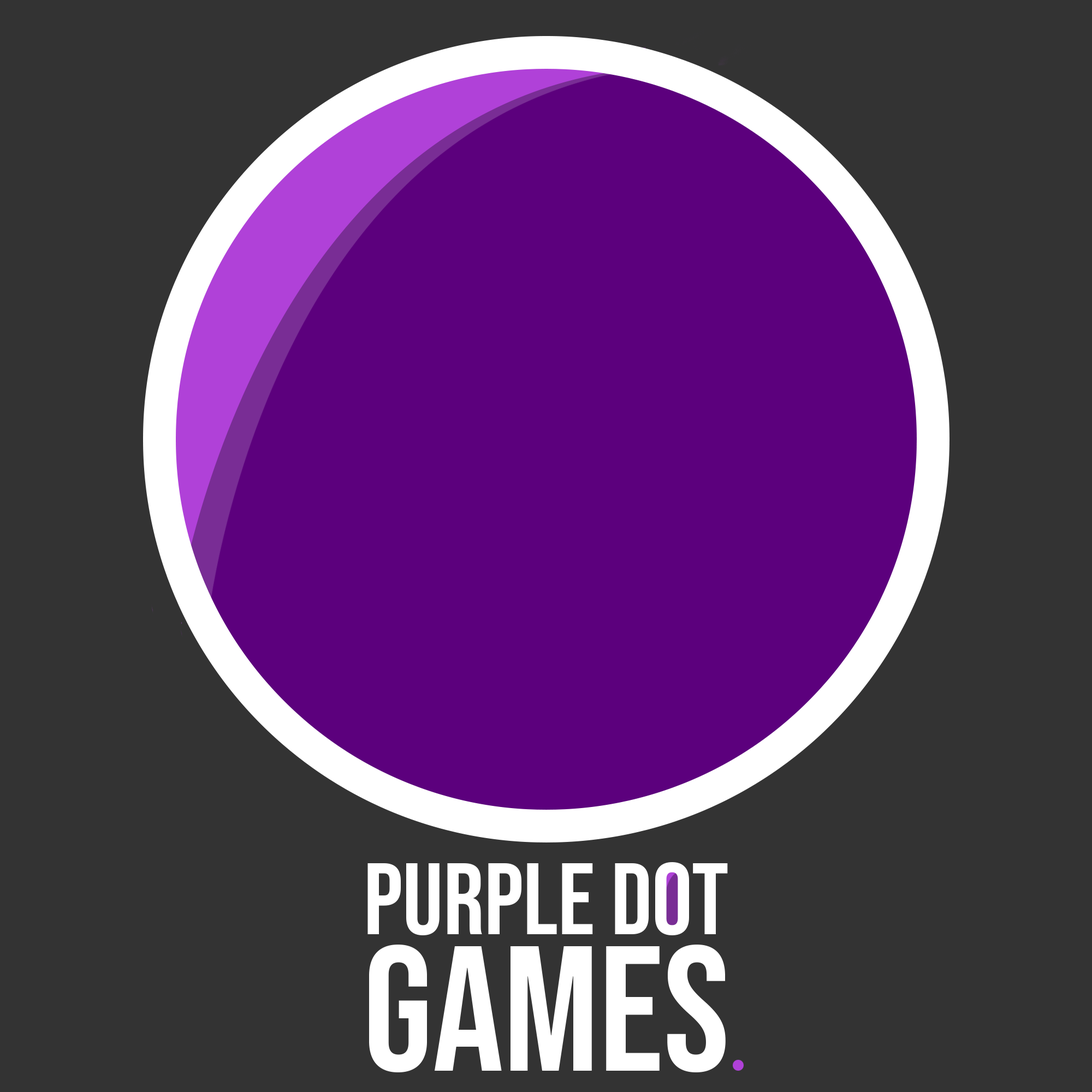
<style>
.page{position:relative;width:1092px;height:1092px;background:#333333}
.page>*{position:absolute;margin:0}
.t1{font:101.2px/106.9px "BebasNeue-Regular";color:#ffffff}
.t2{font:177.4px/136.5px "BebasNeue-Regular";color:#ffffff}
</style>
<div class="page">
<p class="t1" style="left:367px;top:862px;width:361px;height:210px;text-align:center">Purple DOT<br><span class="t2">Games</span></p>
</div>
